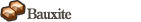
<style>
.page{position:relative;width:141px;height:22px;background:#ffffff}
.page>*{position:absolute;margin:0}
.t1{font:14px "RyuminPro-ExBold";letter-spacing:-0.08em;color:#4c4741}
</style>
<div class="page">
<p class="t1" style="left:27px;top:8px;width:45px;height:12px">Bauxite</p>
</div>
